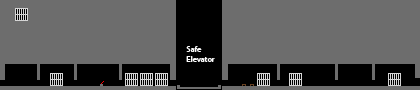
<style>
.page{position:relative;width:420px;height:90px;background:#6d6d6d}
.page>*{position:absolute;margin:0}
.t1{font:8.3px "MyriadPro-Regular";color:#ffffff}
</style>
<div class="page">
<p class="t1" style="left:186px;top:46px;width:29px;height:16px">Safe<br>Elevator</p>
</div>
